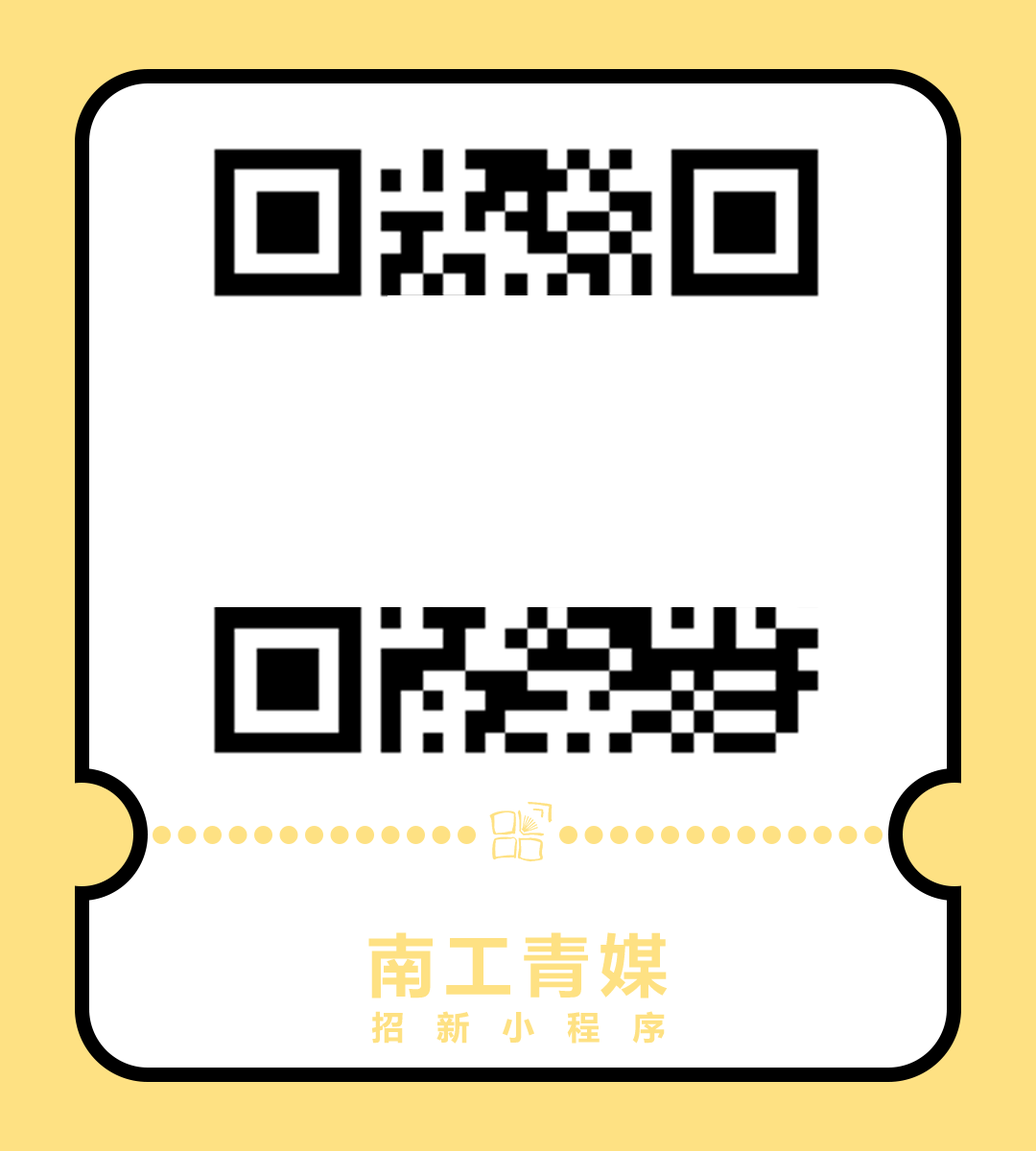
<style>
.page{position:relative;width:1036px;height:1151px;background:#ffffff}
.page>*{position:absolute;margin:0}
.t1{font:67.5px "MicrosoftYaHei-Bold";letter-spacing:0.15em;color:#fee183}
.t2{font:32.6px "MicrosoftYaHei-Bold";letter-spacing:1em;color:#fee183}
</style>
<div class="page">
<p class="t1" style="left:368px;top:932px;width:300px;height:67px">南工青媒</p>
<p class="t2" style="left:372px;top:1011px;width:293px;height:33px">招新小程序</p>
</div>
